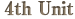
<style>
.page{position:relative;width:75px;height:19px;background:#ffffff}
.page>*{position:absolute;margin:0}
.t1{font:18px "RyuminPro-ExBold";letter-spacing:-0.04em;font-weight:bold}
.t2{font:18px "RyuminPro-ExBold";font-weight:bold}
</style>
<div class="page">
<p class="t1" style="left:4px;top:1px;width:70px;height:15px"><span class="t2">4th</span> Unit</p>
</div>
